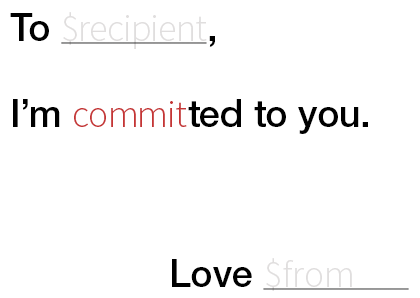
<style>
.page{position:relative;width:420px;height:298px;background:#ffffff}
.page>*{position:absolute;margin:0}
.t1{font:37.9px "SourceSansPro-Light";color:#e0dede}
.t2{font:37.9px "HelveticaNeue-Medium";color:#000000}
.t3{font:37.9px "SourceSansPro-Light";color:#c53535}
</style>
<div class="page">
<p class="t1" style="left:10px;top:12px;width:205px;height:37px"><span class="t2">To </span>$recipient<span class="t2">,</span></p>
<p class="t2" style="left:13px;top:99px;width:355px;height:35px">I’m <span class="t3">commit</span>ted to you.</p>
<p class="t1" style="left:172px;top:258px;width:180px;height:33px"><span class="t2">Love </span>$from</p>
</div>
